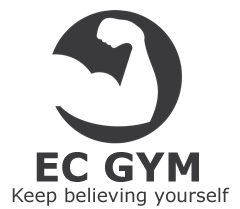
<style>
.page{position:relative;width:240px;height:209px;background:#ffffff}
.page>*{position:absolute;margin:0}
.t1{font:40px "Verdana-Bold";color:#3a3a3c}
.t2{font:18.7px "Verdana";color:#3a3a3c}
</style>
<div class="page">
<p class="t1" style="left:36px;top:152px;width:163px;height:30px">EC GYM</p>
<p class="t2" style="left:12px;top:187px;width:218px;height:19px">Keep believing yourself</p>
</div>
